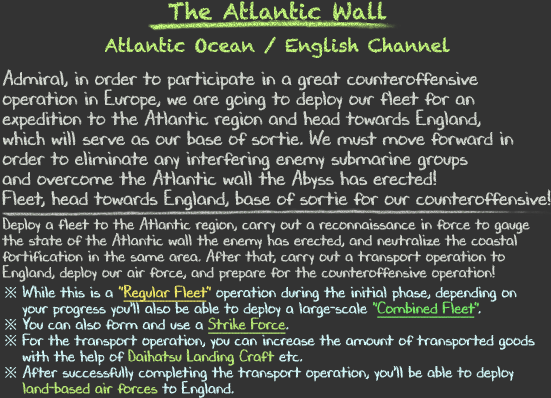
<style>
.page{position:relative;width:551px;height:398px;background:#333333}
.page>*{position:absolute;margin:0}
.t1{font:18px/36px "Chalkduster"}
.t2{font:22px/36px "Chalkduster"}
.t3{font:20px/20px "DJBChalkItUp";color:#d9ded6}
.t4{font:16px/16px "DJBChalkItUp";color:#d9ded6}
.t5{font:16px/20px "DJBChalkItUp";color:#d9ded6}
.t6{font:16px/16px "TimesNewRomanPSMT";color:#d7feff}
.t7{font:16px/16px "DJBChalkItUp";color:#d7feff}
.t8{font:16px/16px "DJBChalkItUp";color:#f5ed68}
.t9{font:16px/16px "DJBChalkItUp";color:#f5ed68;text-decoration:underline}
.t10{font:16px/16px "DJBChalkItUp";color:#7bf26b}
.t11{font:16px/16px "DJBChalkItUp";color:#7bf26b;text-decoration:underline}
.t12{font:16px/16px "DJBChalkItUp";color:#bdef78;text-decoration:underline}
.t13{font:16px/16px "DJBChalkItUp";color:#bdef78}
</style>
<div class="page">
<p class="t1" style="left:105px;top:1px;width:345px;height:57px;text-align:center"><span class="t2">The Atlantic Wall<br></span>Atlantic Ocean / English Channel</p>
<p class="t3" style="left:2px;top:69px;width:549px;height:329px">Admiral, in order to participate in a great counteroffensive<br>operation in Europe, we are going to deploy our fleet for an<br>expedition to the Atlantic region and head towards England,<br>which will serve as our base of sortie. We must move forward in<br>order to eliminate any interfering enemy submarine groups<br>and overcome the Atlantic wall the Abyss has erected!<br>Fleet, head towards England, base of sortie for our counteroffensive!<br><br><span class="t4">Deploy a fleet to the Atlantic region, carry out a reconnaissance in force to gauge<br>the state of the Atlantic wall the enemy has erected, and neutralize the coastal<br>fortification in the same area. After that, carry out a transport operation to<br></span><span class="t5">England, deploy our air force, and prepare for the counteroffensive operation!<br></span><span class="t6">※ </span><span class="t7">While this is a </span><span class="t8">"</span><span class="t9">Regular Fleet</span><span class="t8">"</span><span class="t7"> operation during the initial phase, depending on<br>　 your progress you'll also be able to deploy a large-scale </span><span class="t10">"</span><span class="t11">Combined Fleet</span><span class="t10">"</span><span class="t7">.<br></span><span class="t6">※ </span><span class="t7">You can also form and use a </span><span class="t12">Strike Force</span><span class="t7">.<br></span><span class="t6">※ </span><span class="t7">For the transport operation, you can increase the amount of transported goods<br>　 with the help of </span><span class="t13">Daihatsu Landing Craft</span><span class="t7"> etc.<br></span><span class="t6">※ </span><span class="t7">After successfully completing the transport operation, you'll be able to deploy<br>　 </span><span class="t13">land-based air forces</span><span class="t7"> to England.</span></p>
</div>
